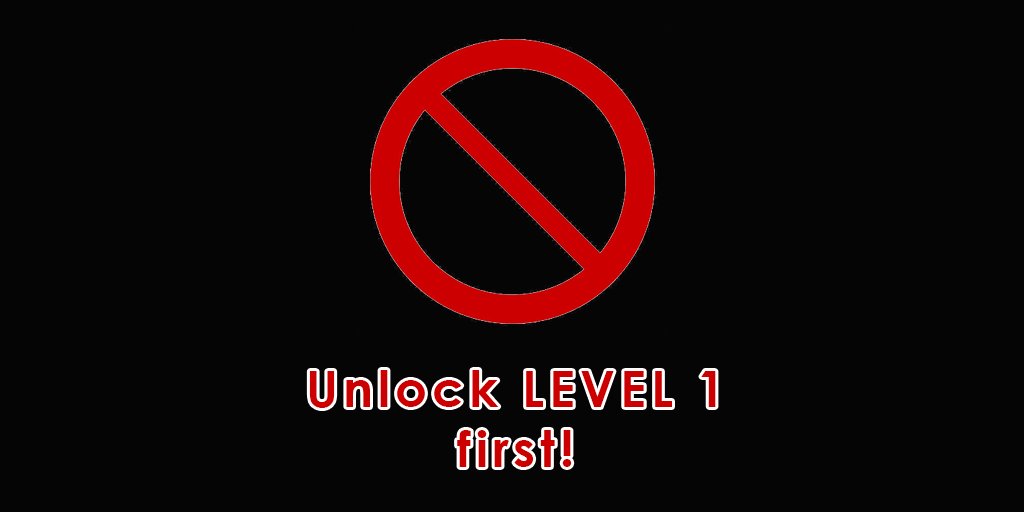
<style>
.page{position:relative;width:1024px;height:512px;background:#050505}
.page>*{position:absolute;margin:0}
.t1{font:50px "CenturyGothic-Bold";letter-spacing:0.1em;color:#cd0001}
</style>
<div class="page">
<p class="t1" style="left:309px;top:370px;width:407px;height:97px;text-align:center">Unlock LEVEL 1<br>first!</p>
</div>
